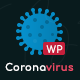
<style>
.page{position:relative;width:80px;height:80px;background:#091b1d}
.page>*{position:absolute;margin:0}
.t1{font:10px "Comfortaa-Regular";letter-spacing:0.04em;color:#ffffff}
.t2{font:10px "Comfortaa-Bold";letter-spacing:0.04em;color:#ffffff}
.t3{font:10px "Comfortaa-Bold";letter-spacing:0.04em;color:#ed4c67}
</style>
<div class="page">
<p class="t1" style="left:46px;top:45px;width:17px;height:8px">WP</p>
<p class="t2" style="left:5px;top:62px;width:69px;height:9px">Corona<span class="t3">virus</span></p>
</div>
